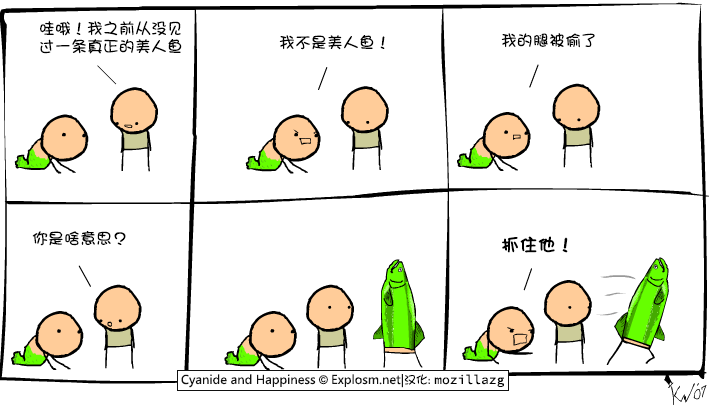
<style>
.page{position:relative;width:711px;height:405px;background:#ffffff}
.page>*{position:absolute;margin:0}
.t1{font:16px/18px "DFGirl";color:#000000}
.t2{font:16px "DFGirl";color:#000000}
.t3{font:18px "DFGirl";color:#000000;font-weight:bold}
</style>
<div class="page">
<p class="t1" style="left:40px;top:21px;width:142px;height:33px">哇哦！我之前从没见<br>过一条真正的美人鱼</p>
<p class="t2" style="left:279px;top:35px;width:106px;height:15px">我不是美人鱼！</p>
<p class="t2" style="left:501px;top:33px;width:94px;height:15px">我的腿被偷了</p>
<p class="t2" style="left:32px;top:231px;width:94px;height:15px">你是啥意思？</p>
<p class="t3" style="left:502px;top:236px;width:66px;height:17px">抓住他！</p>
</div>
